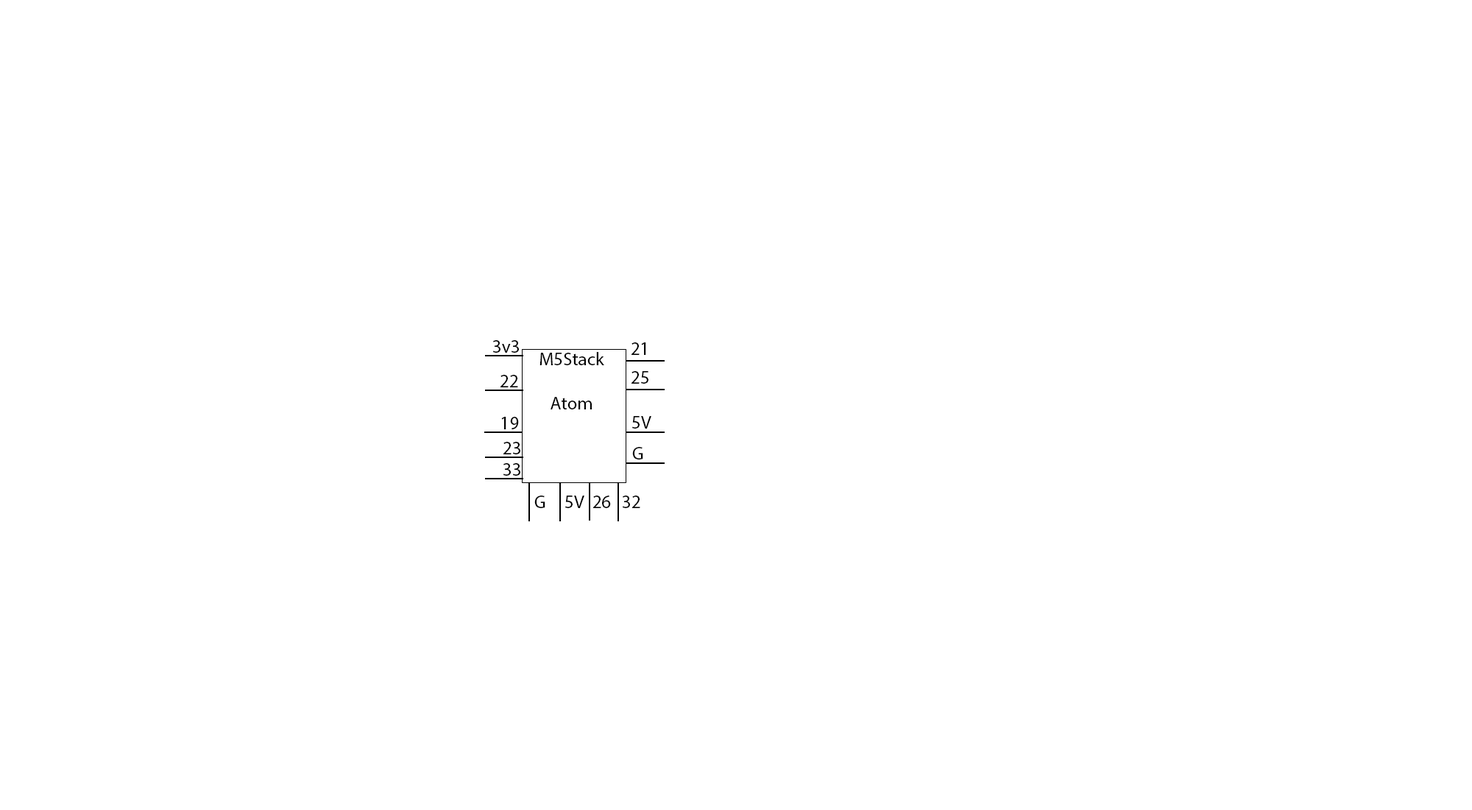
<style>
.page{position:relative;width:1472px;height:810px;background:#ffffff}
.page>*{position:absolute;margin:0}
.t1{font:18.4px "MyriadPro-Regular";color:#000000}
</style>
<div class="page">
<p class="t1" style="left:493px;top:340px;width:26px;height:13px">3v3</p>
<p class="t1" style="left:540px;top:352px;width:64px;height:57px;text-align:center">M5Stack<br><br>Atom</p>
<p class="t1" style="left:632px;top:342px;width:14px;height:13px">21</p>
<p class="t1" style="left:501px;top:375px;width:17px;height:12px">22</p>
<p class="t1" style="left:632px;top:371px;width:17px;height:13px">25</p>
<p class="t1" style="left:501px;top:417px;width:18px;height:12px">19</p>
<p class="t1" style="left:632px;top:416px;width:20px;height:12px">5V</p>
<p class="t1" style="left:504px;top:442px;width:17px;height:12px">23</p>
<p class="t1" style="left:632px;top:447px;width:11px;height:12px">G</p>
<p class="t1" style="left:504px;top:463px;width:17px;height:13px">33</p>
<p class="t1" style="left:534px;top:495px;width:12px;height:13px">G</p>
<p class="t1" style="left:565px;top:495px;width:20px;height:13px">5V</p>
<p class="t1" style="left:593px;top:495px;width:18px;height:13px">26</p>
<p class="t1" style="left:623px;top:495px;width:18px;height:13px">32</p>
</div>
